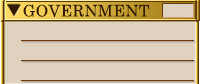
<style>
.page{position:relative;width:200px;height:84px;background:#dfd3c0}
.page>*{position:absolute;margin:0}
.t1{font:16px "CenturySchoolbook";letter-spacing:0.025em;color:#321a02}
</style>
<div class="page">
<p class="t1" style="left:23px;top:4px;width:127px;height:13px">GOVERNMENT</p>
</div>
